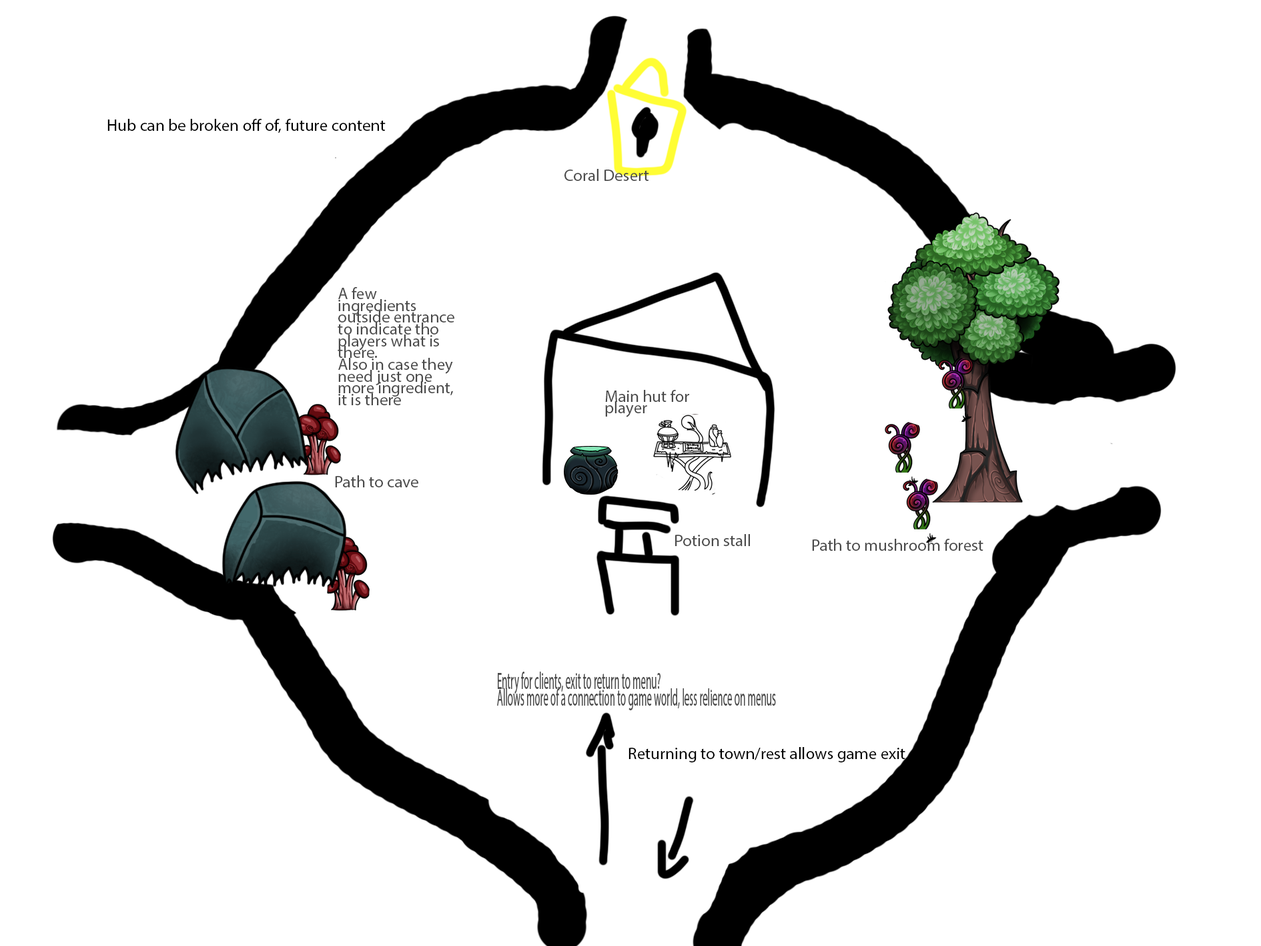
<style>
.page{position:relative;width:1261px;height:946px;background:#ffffff}
.page>*{position:absolute;margin:0}
.t1{font:16.7px "MyriadPro-Regular";color:#000000}
.t2{font:16.7px "MyriadPro-Regular";color:#4a4a4a}
.t3{font:16.7px/11.8px "MyriadPro-Regular";color:#4a4a4a}
.t4{font:23.6px/16.7px "MyriadPro-Regular";color:#4a4a4a;scale:0.42 1}
</style>
<div class="page">
<p class="t1" style="left:107px;top:119px;width:279px;height:14px">Hub can be broken off of, future content</p>
<p class="t2" style="left:565px;top:169px;width:84px;height:12px">Coral Desert</p>
<p class="t3" style="left:338px;top:287px;width:116px;height:118px">A few ingredients outside entrance to indicate tho players what is there. <br>Also in case they need just one more ingredient, it is there</p>
<p class="t2" style="left:605px;top:390px;width:84px;height:27px">Main hut for player</p>
<p class="t2" style="left:335px;top:475px;width:83px;height:12px">Path to cave</p>
<p class="t2" style="left:675px;top:534px;width:75px;height:12px">Potion stall</p>
<p class="t2" style="left:812px;top:538px;width:172px;height:12px">Path to mushroom forest</p>
<p class="t4" style="left:497px;top:671px;width:279px;height:39px">Entry for clients, exit to return to menu? <br>Allows more of a connection to game world, less relience on menus</p>
<p class="t1" style="left:629px;top:747px;width:276px;height:15px">Returning to town/rest allows game exit</p>
</div>
